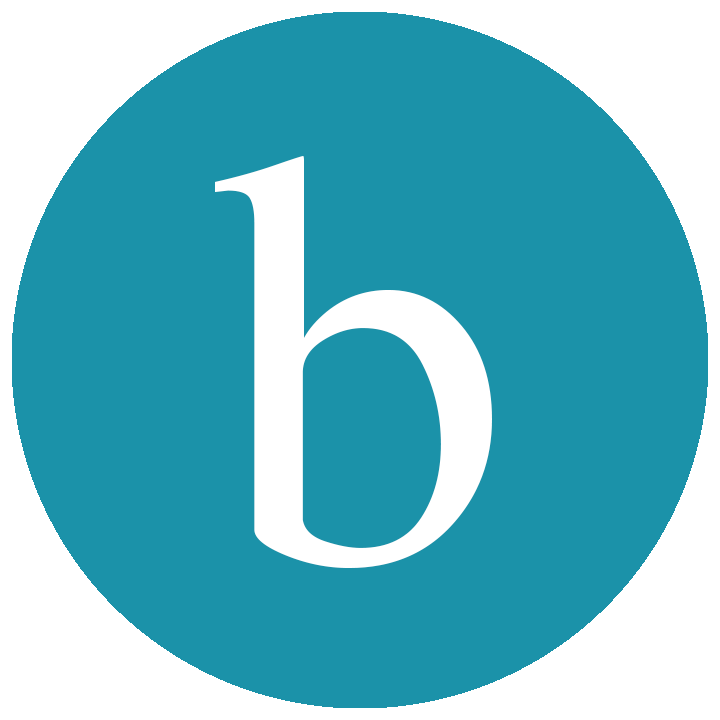
<style>
.page{position:relative;width:720px;height:720px;background:#1b92a9}
.page>*{position:absolute;margin:0}
.t1{font:1024px "Times-Roman";color:#ffffff}
</style>
<div class="page">
<p class="t1" style="left:215px;top:156px;width:277px;height:412px">b</p>
</div>
